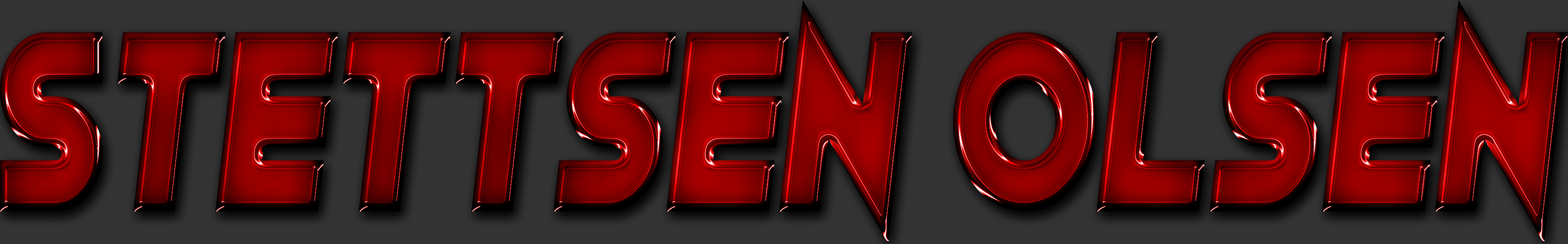
<style>
.page{position:relative;width:1568px;height:244px;background:#333333}
.page>*{position:absolute;margin:0}
.t1{font:262.4px "LeanForeword";scale:0.8 1}
</style>
<div class="page">
<p class="t1" style="left:0px;top:0px;width:1568px;height:244px">Stettsen Olsen</p>
</div>
